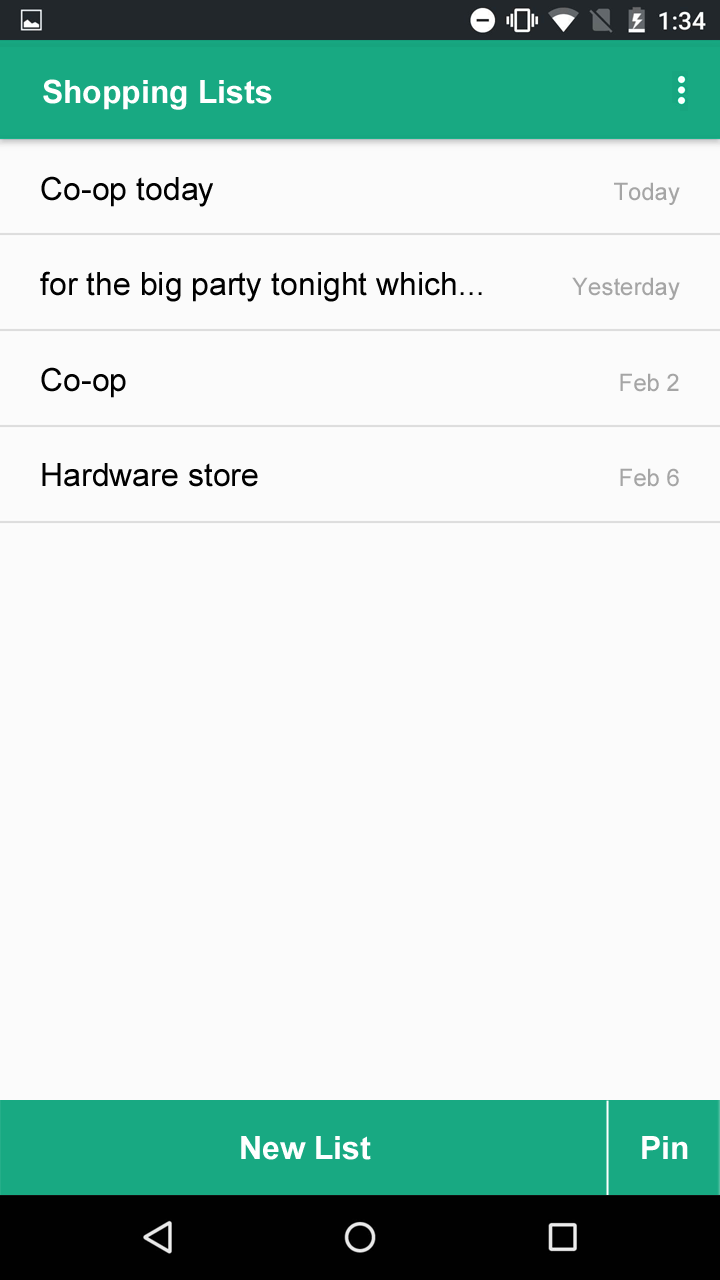
<style>
.page{position:relative;width:720px;height:1280px;background:#fbfbfb}
.page>*{position:absolute;margin:0}
.t1{font:32px "Arial-BoldMT";color:#ffffff}
.t2{font:32px "ArialMT";color:#000000}
.t3{font:24px "ArialMT";color:#a5a5a5}
</style>
<div class="page">
<p class="t1" style="left:43px;top:79px;width:229px;height:31px">Shopping Lists</p>
<p class="t2" style="left:41px;top:176px;width:172px;height:31px">Co-op today</p>
<p class="t3" style="left:614px;top:182px;width:66px;height:23px">Today</p>
<p class="t2" style="left:40px;top:271px;width:442px;height:31px">for the big party tonight which...</p>
<p class="t3" style="left:572px;top:277px;width:108px;height:23px">Yesterday</p>
<p class="t2" style="left:41px;top:367px;width:85px;height:31px">Co-op</p>
<p class="t3" style="left:620px;top:373px;width:59px;height:19px">Feb 2</p>
<p class="t2" style="left:42px;top:463px;width:216px;height:24px">Hardware store</p>
<p class="t3" style="left:620px;top:468px;width:59px;height:19px">Feb 6</p>
<p class="t1" style="left:241px;top:1136px;width:130px;height:24px">New List</p>
<p class="t1" style="left:642px;top:1136px;width:46px;height:23px">Pin</p>
</div>
